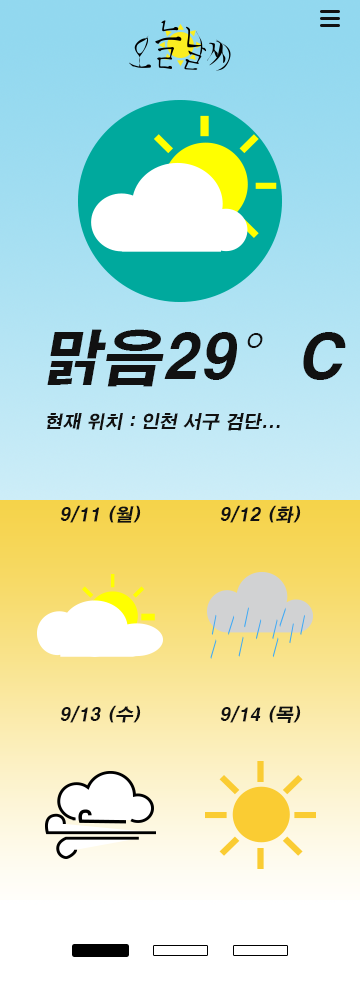
<style>
.page{position:relative;width:360px;height:1000px}
.page>*{position:absolute;margin:0}
.t1{font:60px "H2gtrE";color:#111111;text-transform:uppercase;font-style:italic}
.t2{font:17.9px "H2gtrE";color:#111111;text-transform:uppercase;font-style:italic}
</style>
<div class="page">
<p class="t1" style="left:47px;top:329px;width:299px;height:58px">맑음29°c</p>
<p class="t2" style="left:47px;top:413px;width:233px;height:18px">현재 위치 : 인천 서구 검단...</p>
<p class="t2" style="left:60px;top:505px;width:81px;height:18px">9/11 (월)</p>
<p class="t2" style="left:220px;top:505px;width:81px;height:18px">9/12 (화)</p>
<p class="t2" style="left:60px;top:705px;width:81px;height:18px">9/13 (수)</p>
<p class="t2" style="left:220px;top:705px;width:81px;height:18px">9/14 (목)</p>
</div>
